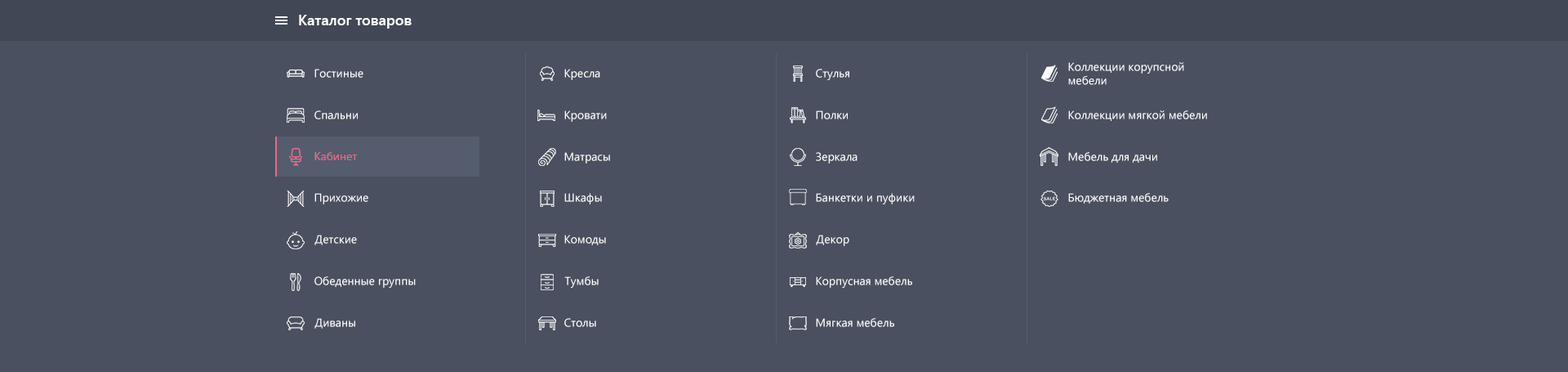
<style>
.page{position:relative;width:1568px;height:372px;background:#4a505f}
.page>*{position:absolute;margin:0}
.t1{font:14.7px "SegoeUI-Semibold";color:#ffffff}
.t2{font:11.4px "SegoeUI";color:#ffffff}
.t3{font:11.4px "SegoeUI";color:#e66a86}
.t4{font:11.4px "SegoeUI";color:#fefefe}
</style>
<div class="page">
<p class="t1" style="left:299px;top:15px;width:113px;height:14px">Каталог товаров</p>
<p class="t2" style="left:1068px;top:62px;width:116px;height:23px">Коллекции корупсной<br>мебели</p>
<p class="t2" style="left:314px;top:69px;width:49px;height:9px">Гостиные</p>
<p class="t2" style="left:564px;top:69px;width:36px;height:11px">Кресла</p>
<p class="t2" style="left:816px;top:69px;width:33px;height:11px">Стулья</p>
<p class="t2" style="left:314px;top:110px;width:44px;height:9px">Спальни</p>
<p class="t2" style="left:564px;top:110px;width:43px;height:12px">Кровати</p>
<p class="t2" style="left:816px;top:110px;width:32px;height:9px">Полки</p>
<p class="t2" style="left:1068px;top:110px;width:139px;height:11px">Коллекции мягкой мебели</p>
<p class="t3" style="left:314px;top:152px;width:44px;height:8px">Кабинет</p>
<p class="t2" style="left:564px;top:152px;width:46px;height:11px">Матрасы</p>
<p class="t2" style="left:816px;top:152px;width:42px;height:11px">Зеркала</p>
<p class="t2" style="left:1068px;top:152px;width:89px;height:11px">Мебель для дачи</p>
<p class="t2" style="left:314px;top:193px;width:54px;height:11px">Прихожие</p>
<p class="t2" style="left:564px;top:193px;width:38px;height:11px">Шкафы</p>
<p class="t4" style="left:816px;top:193px;width:99px;height:11px">Банкетки и пуфики</p>
<p class="t2" style="left:1068px;top:193px;width:101px;height:10px">Бюджетная мебель</p>
<p class="t2" style="left:314px;top:234px;width:43px;height:11px">Детские</p>
<p class="t2" style="left:564px;top:234px;width:42px;height:11px">Комоды</p>
<p class="t2" style="left:816px;top:234px;width:33px;height:12px">Декор</p>
<p class="t2" style="left:314px;top:276px;width:102px;height:11px">Обеденные группы</p>
<p class="t2" style="left:564px;top:276px;width:35px;height:11px">Тумбы</p>
<p class="t2" style="left:816px;top:276px;width:96px;height:11px">Корпусная мебель</p>
<p class="t2" style="left:314px;top:318px;width:41px;height:10px">Диваны</p>
<p class="t2" style="left:564px;top:318px;width:32px;height:9px">Столы</p>
<p class="t2" style="left:816px;top:318px;width:78px;height:9px">Мягкая мебель</p>
</div>
